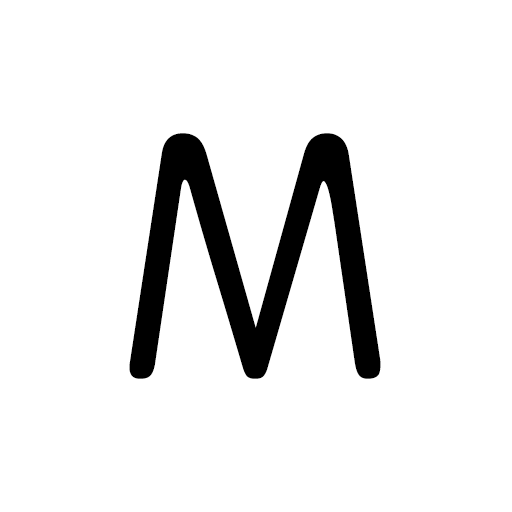
<style>
.page{position:relative;width:512px;height:512px;background:#ffffff}
.page>*{position:absolute;margin:0}
.t1{font:348.1px "STYuanti-SC-Regular";color:#000000}
</style>
<div class="page">
<p class="t1" style="left:129px;top:133px;width:252px;height:246px">M</p>
</div>
